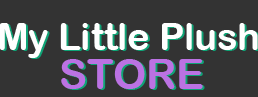
<style>
.page{position:relative;width:258px;height:97px;background:#333333}
.page>*{position:absolute;margin:0}
.t1{font:37.5px/39.6px "ArialRoundedMTBold";color:#ffffff}
.t2{font:41.7px/39.6px "ArialRoundedMTBold";color:#bb72e3}
</style>
<div class="page">
<p class="t1" style="left:0px;top:23px;width:258px;height:66px">My Little Plush<br>      <span class="t2">STORE</span></p>
</div>
